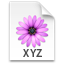
<style>
.page{position:relative;width:64px;height:64px;background:#ffffff}
.page>*{position:absolute;margin:0}
.t1{font:10.5px "MyriadPro-Semibold";letter-spacing:0.02em;color:#4b4b4b}
</style>
<div class="page">
<p class="t1" style="left:23px;top:49px;width:19px;height:8px">XYZ</p>
</div>
